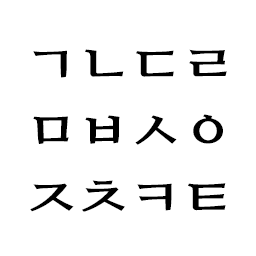
<style>
.page{position:relative;width:256px;height:256px;background:#ffffff}
.page>*{position:absolute;margin:0}
.t1{font:55.4px "NanumMyeongjoExtraBold";color:#000000}
</style>
<div class="page">
<p class="t1" style="left:30px;top:49px;width:197px;height:163px">ㄱㄴㄷㄹ<br>ㅁㅂㅅㅇ<br>ㅈㅊㅋㅌ</p>
</div>
